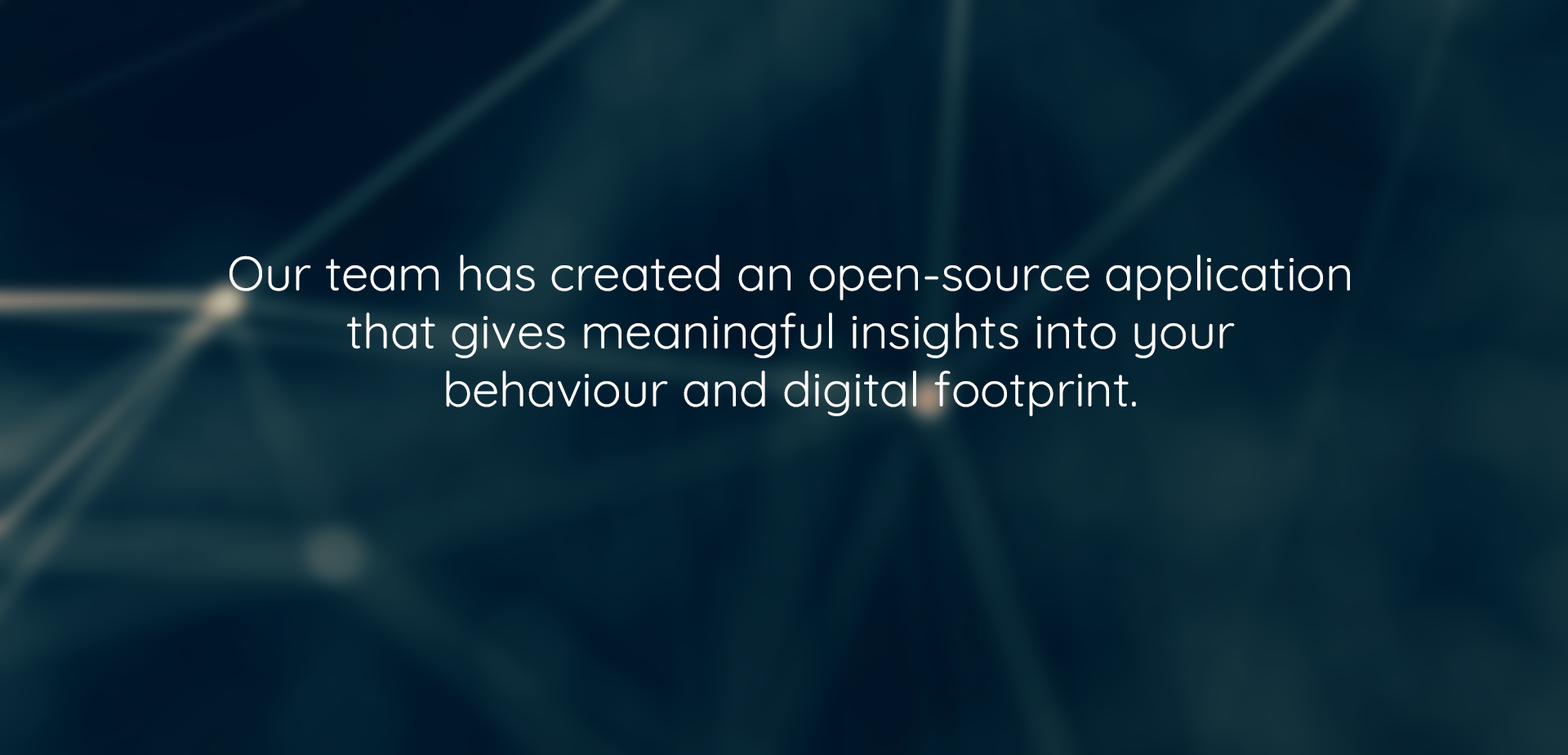
<style>
.page{position:relative;width:1568px;height:755px}
.page>*{position:absolute;margin:0}
.t1{font:48.5px "Quicksand-Regular";color:#ffffff}
</style>
<div class="page">
<p class="t1" style="left:229px;top:255px;width:1121px;height:161px;text-align:center">Our team has created an open-source application<br>that gives meaningful insights into your<br>behaviour and digital footprint.</p>
</div>
